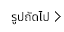
<style>
.page{position:relative;width:64px;height:32px;background:#ffffff}
.page>*{position:absolute;margin:0}
.t1{font:12px "NotoSansThai-Regular";color:#000000}
</style>
<div class="page">
<p class="t1" style="left:11px;top:11px;width:38px;height:14px">รูปถัดไป</p>
</div>
